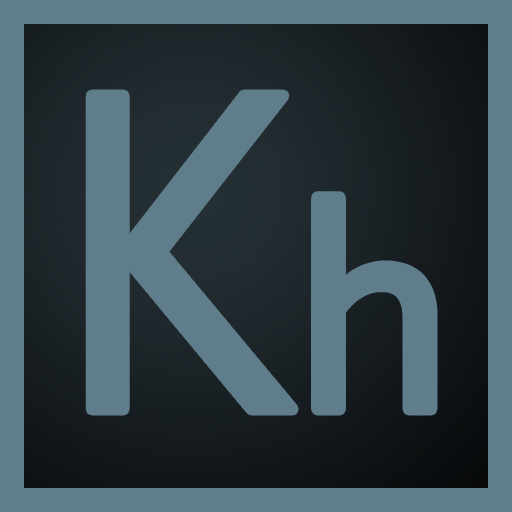
<style>
.page{position:relative;width:512px;height:512px;background:#607d8b}
.page>*{position:absolute;margin:0}
.t1{font:480px "Corbel";color:#607d8b;scale:0.83 1}
.t2{font:300px "Corbel";color:#607d8b}
</style>
<div class="page">
<p class="t1" style="left:91px;top:95px;width:341px;height:315px">K<span class="t2">h</span></p>
</div>
